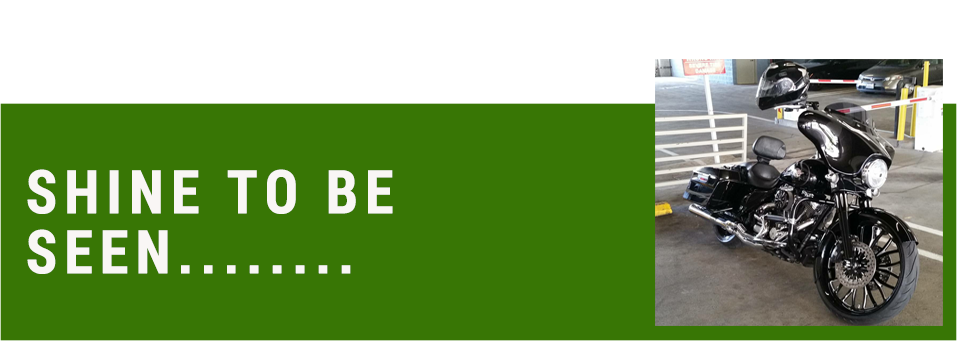
<style>
.page{position:relative;width:960px;height:345px;background:#387605}
.page>*{position:absolute;margin:0}
.t1{font:60px/30px "RobotoCondensed-Bold";letter-spacing:0.1em;color:#f9f6f5;font-weight:bold}
</style>
<div class="page">
<p class="t1" style="left:27px;top:169px;width:366px;height:105px">SHINE TO BE<br><br>SEEN........</p>
</div>
